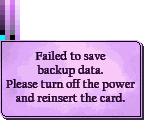
<style>
.page{position:relative;width:144px;height:120px;background:#ffffff}
.page>*{position:absolute;margin:0}
.t1{font:12px/14px "CalifornianFB-Reg";letter-spacing:0.025em;color:#100010}
</style>
<div class="page">
<p class="t1" style="left:6px;top:51px;width:129px;height:51px;text-align:center">Failed to save<br>backup data.<br>Please turn off the power<br>and reinsert the card.</p>
</div>
